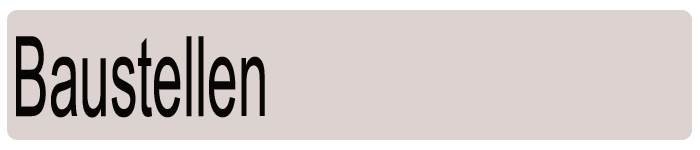
<style>
.page{position:relative;width:700px;height:150px;background:#dcd3d1}
.page>*{position:absolute;margin:0}
.t1{font:111.6px "ArialMT";color:#070605;scale:0.49 1}
</style>
<div class="page">
<p class="t1" style="left:16px;top:36px;width:249px;height:82px">Baustellen</p>
</div>
